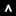
<style>
.page{position:relative;width:16px;height:16px;background:#000000}
.page>*{position:absolute;margin:0}
.t1{font:20px "Roboto-Regular";color:#ffffff;scale:1.04 1}
</style>
<div class="page">
<p class="t1" style="left:4px;top:4px;width:8px;height:8px">^</p>
</div>
